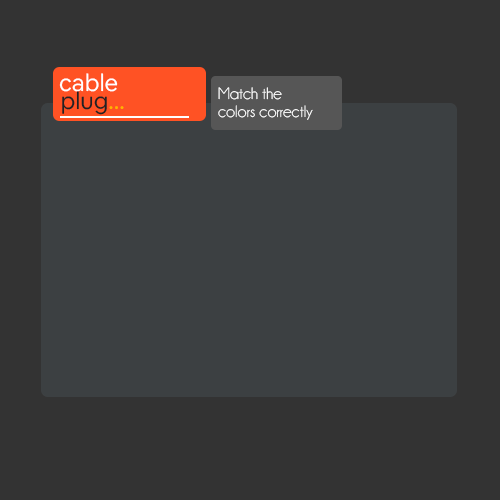
<style>
.page{position:relative;width:500px;height:500px;background:#333333}
.page>*{position:absolute;margin:0}
.t1{font:23.9px "AirbnbCerealApp-Book";color:#ffffff}
.t2{font:16.9px/17.7px "Champagne&Limousines";color:#ffffff}
.t3{font:23.9px "AirbnbCerealApp-Book";color:#202224}
.t4{font:23.9px "AirbnbCerealApp-Book";color:#ffb400}
</style>
<div class="page">
<p class="t1" style="left:59px;top:73px;width:59px;height:19px">cable</p>
<p class="t2" style="left:218px;top:87px;width:95px;height:33px">Match the<br>colors correctly</p>
<p class="t3" style="left:62px;top:91px;width:62px;height:24px">plug<span class="t4">...</span></p>
</div>
